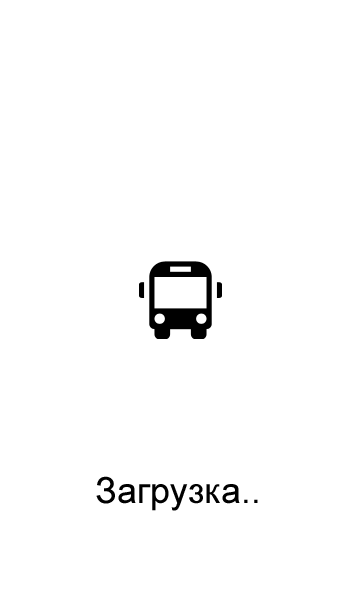
<style>
.page{position:relative;width:360px;height:600px;background:#ffffff}
.page>*{position:absolute;margin:0}
.t1{font:36px "ArialMT";color:#000000}
</style>
<div class="page">
<p class="t1" style="left:96px;top:476px;width:162px;height:35px">Загрузка..</p>
</div>
